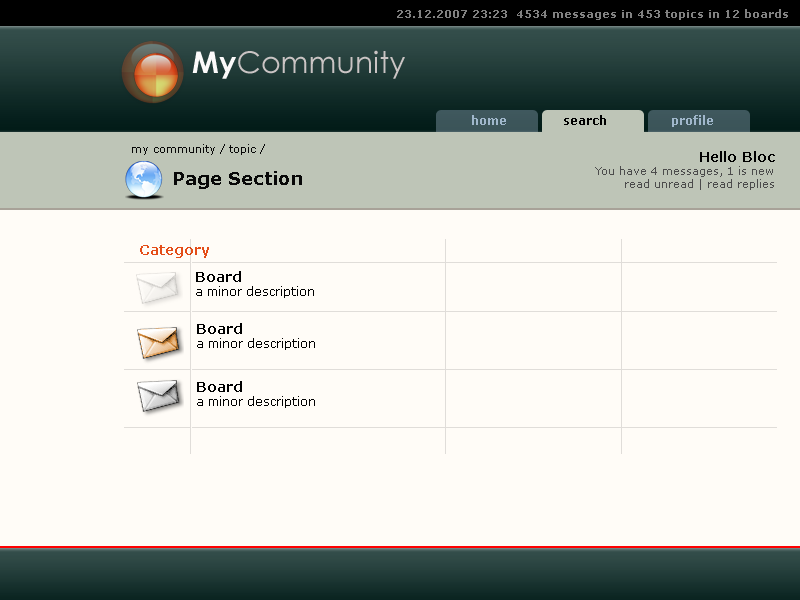
<style>
.page{position:relative;width:800px;height:600px;background:#fffcf7}
.page>*{position:absolute;margin:0}
.t1{font:11px "Verdana-Bold";color:#818181}
.t2{font:30px "CenturyGothic";color:#cac4c4}
.t3{font:30px "CenturyGothic-Bold";color:#fcfafa}
.t4{font:11px "Verdana";color:#080808}
.t5{font:11px "Verdana";color:#4c4c4c}
.t6{font:14px "Verdana-Bold";color:#000000}
.t7{font:18px "Verdana-Bold";color:#080808}
.t8{font:14px "Verdana-Bold";color:#e44d18}
.t9{font:12px "Verdana";color:#000000}
</style>
<div class="page">
<p class="t1" style="left:397px;top:9px;width:391px;height:11px">23.12.2007 23:23  4534 messages in 453 topics in 12 boards</p>
<p class="t2" style="left:192px;top:50px;width:213px;height:29px"><span class="t3">My</span>Community</p>
<p class="t4" style="left:132px;top:144px;width:133px;height:11px">my community / topic /</p>
<p class="t5" style="left:595px;top:151px;width:180px;height:39px;text-align:right"><span class="t6">Hello Bloc<br></span>You have 4 messages, 1 is new<br>read unread | read replies</p>
<p class="t7" style="left:174px;top:171px;width:128px;height:18px">Page Section</p>
<p class="t8" style="left:140px;top:245px;width:69px;height:13px">Category</p>
<p class="t9" style="left:196px;top:271px;width:118px;height:27px"><span class="t6">Board<br></span>a minor description</p>
<p class="t9" style="left:197px;top:323px;width:118px;height:27px"><span class="t6">Board<br></span>a minor description</p>
<p class="t9" style="left:197px;top:381px;width:118px;height:27px"><span class="t6">Board<br></span>a minor description</p>
</div>
